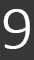
<style>
.page{position:relative;width:34px;height:60px;background:#373737}
.page>*{position:absolute;margin:0}
.t1{font:64px "Calibri-Light";color:#ffffff}
</style>
<div class="page">
<p class="t1" style="left:3px;top:9px;width:27px;height:40px">9</p>
</div>
